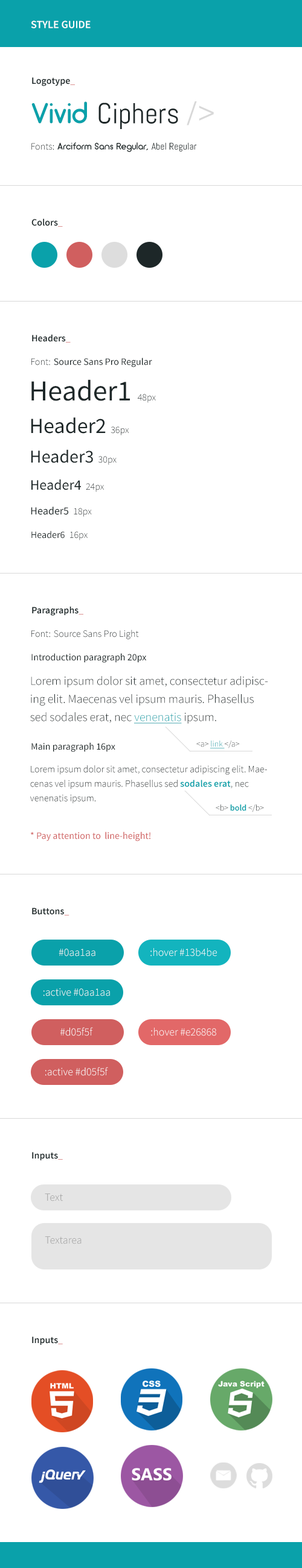
<style>
.page{position:relative;width:302px;height:1568px;background:#ffffff}
.page>*{position:absolute;margin:0}
.t1{font:10.9px "SourceSansPro-Semibold";color:#ffffff;text-transform:uppercase}
.t2{font:9.6px "SourceSansPro-Semibold";color:#1d2829}
.t3{font:9.6px "SourceSansPro-Light";color:#d05f5f}
.t4{font:28.9px "Abel-Regular";color:#1d2728}
.t5{font:28.9px "Arciform";color:#0aa1aa}
.t6{font:28.9px "Abel-Regular";color:#d8d8d8}
.t7{font:9.6px "Arciform";color:#1d2728}
.t8{font:9.6px "SourceSansPro-Light";color:#1d2728}
.t9{font:9.6px "Abel-Regular";color:#1d2728}
.t10{font:9.6px "SourceSansPro-Regular";color:#1d2728}
.t11{font:28.9px "SourceSansPro-Regular";color:#1d2728}
.t12{font:21.7px "SourceSansPro-Regular";color:#1d2728}
.t13{font:18.1px "SourceSansPro-Regular";color:#1d2728}
.t14{font:14.5px "SourceSansPro-Regular";color:#1d2728}
.t15{font:10.9px "SourceSansPro-Regular";color:#1d2728}
.t16{font:9.6px "SourceSansPro-Light"}
.t17{font:12.1px/18.1px "SourceSansPro-Light";color:#1d2728}
.t18{font:12.1px/18.1px "SourceSansPro-Light";color:#0aa1aa;text-decoration:underline}
.t19{font:8.4px "SourceSansPro-Light";text-decoration:underline}
.t20{font:8.4px "SourceSansPro-Light"}
.t21{font:9.6px/14.5px "SourceSansPro-Light";color:#1d2728}
.t22{font:9.6px/14.5px "SourceSansPro-Semibold";color:#0aa1aa}
.t23{font:8.4px "SourceSansPro-Semibold";color:#0aa1aa}
.t24{font:8.4px "SourceSansPro-Light";color:#1d2728}
.t25{font:9.6px "SourceSansPro-Regular";color:#d05f5f}
.t26{font:10.9px "SourceSansPro-Light";color:#ffffff}
.t27{font:10.9px "SourceSansPro-Light";color:#9a9a9a}
</style>
<div class="page">
<p class="t1" style="left:31px;top:21px;width:59px;height:7px">Style Guide</p>
<p class="t2" style="left:32px;top:77px;width:43px;height:9px">Logotype<span class="t3">_</span></p>
<p class="t4" style="left:31px;top:101px;width:182px;height:28px"><span class="t5">Vivid </span>Ciphers <span class="t6">/&gt;</span></p>
<p class="t7" style="left:31px;top:142px;width:165px;height:10px"><span class="t8">Fonts:</span> Arciform Sans Regular, <span class="t9">Abel Regular</span></p>
<p class="t2" style="left:31px;top:218px;width:32px;height:9px">Colors<span class="t3">_</span></p>
<p class="t2" style="left:32px;top:334px;width:39px;height:9px">Headers<span class="t3">_</span></p>
<p class="t10" style="left:31px;top:358px;width:121px;height:9px"><span class="t8">Font: </span>Source Sans Pro Regular</p>
<p class="t11" style="left:31px;top:379px;width:125px;height:24px">Header1 <span class="t8">48px</span></p>
<p class="t12" style="left:31px;top:417px;width:98px;height:18px">Header2 <span class="t8">36px</span></p>
<p class="t13" style="left:31px;top:449px;width:85px;height:16px">Header3 <span class="t8">30px</span></p>
<p class="t14" style="left:31px;top:479px;width:73px;height:13px">Header4 <span class="t8">24px</span></p>
<p class="t15" style="left:31px;top:507px;width:61px;height:10px">Header5 <span class="t8">18px</span></p>
<p class="t10" style="left:31px;top:531px;width:56px;height:9px">Header6 <span class="t8">16px</span></p>
<p class="t2" style="left:32px;top:606px;width:51px;height:10px">Paragraphs<span class="t3">_</span></p>
<p class="t16" style="left:31px;top:630px;width:108px;height:9px">Font: Source Sans Pro Light</p>
<p class="t10" style="left:31px;top:653px;width:116px;height:10px">Introduction paragraph 20px</p>
<p class="t17" style="left:30px;top:676px;width:238px;height:48px">Lorem ipsum dolor sit amet, consectetur adipiscing elit. Maecenas vel ipsum mauris. Phasellus sed sodales erat, nec <span class="t18">venenatis</span> ipsum.</p>
<p class="t10" style="left:31px;top:742px;width:84px;height:10px">Main paragraph 16px</p>
<p class="t19" style="left:196px;top:741px;width:43px;height:7px"><span class="t20">&lt;a&gt; </span>link <span class="t20">&lt;/a&gt;</span></p>
<p class="t21" style="left:30px;top:765px;width:237px;height:38px">Lorem ipsum dolor sit amet, consectetur adipiscing elit. Maecenas vel ipsum mauris. Phasellus sed <span class="t22">sodales erat</span>, nec venenatis ipsum.</p>
<p class="t23" style="left:215px;top:805px;width:49px;height:7px"><span class="t24">&lt;b&gt; </span>bold <span class="t24">&lt;/b&gt;</span></p>
<p class="t25" style="left:31px;top:832px;width:119px;height:9px">* Pay attention to  line-height!</p>
<p class="t2" style="left:32px;top:908px;width:37px;height:7px">Buttons<span class="t3">_</span></p>
<p class="t26" style="left:58px;top:949px;width:37px;height:7px">#0aa1aa</p>
<p class="t26" style="left:150px;top:948px;width:67px;height:8px">:hover #13b4be</p>
<p class="t26" style="left:43px;top:988px;width:67px;height:8px">:active #0aa1aa</p>
<p class="t26" style="left:60px;top:1027px;width:33px;height:9px">#d05f5f</p>
<p class="t26" style="left:151px;top:1028px;width:65px;height:8px">:hover #e26868</p>
<p class="t26" style="left:45px;top:1067px;width:63px;height:9px">:active #d05f5f</p>
<p class="t2" style="left:32px;top:1152px;width:31px;height:8px">Inputs<span class="t3">_</span></p>
<p class="t27" style="left:45px;top:1193px;width:18px;height:8px">Text</p>
<p class="t27" style="left:45px;top:1236px;width:36px;height:8px">Textarea</p>
<p class="t2" style="left:32px;top:1336px;width:31px;height:9px">Inputs<span class="t3">_</span></p>
</div>
